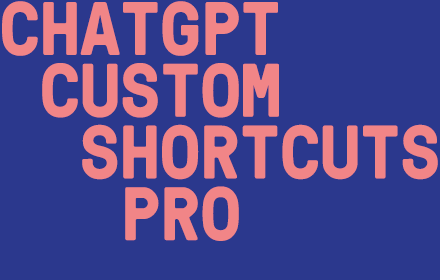
<style>
.page{position:relative;width:440px;height:280px;background:#2b388d}
.page>*{position:absolute;margin:0}
.t1{font:75.3px/61.7px "GTPressuraMonoTrial-Bold";color:#f28587}
.t2{font:75.1px/61.7px "GTPressuraMonoTrial-Bold";color:#f28587}
</style>
<div class="page">
<p class="t1" style="left:2px;top:1px;width:436px;height:240px">CHATGPT<br> CUSTOM <br><span class="t2">  SHORTCUTS <br></span>   PRO</p>
</div>
